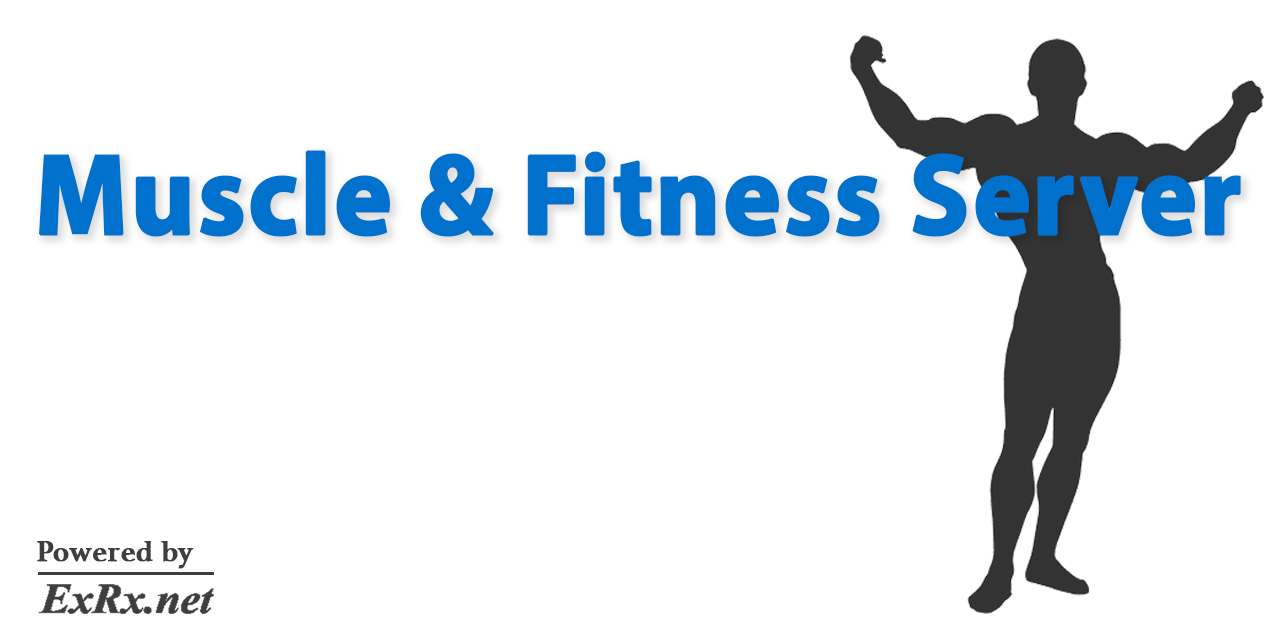
<style>
.page{position:relative;width:1280px;height:640px;background:#ffffff}
.page>*{position:absolute;margin:0}
.t1{font:115.2px "MyriadPro-Bold";color:#0071cc;font-weight:bold;scale:0.95 1}
.t2{font:30px "Athelas-Bold";color:#3e3e3e;font-weight:bold}
</style>
<div class="page">
<p class="t1" style="left:39px;top:150px;width:1202px;height:87px">Muscle &amp; Fitness Server</p>
<p class="t2" style="left:37px;top:541px;width:157px;height:28px">Powered by</p>
</div>
